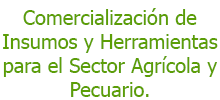
<style>
.page{position:relative;width:220px;height:100px;background:#ffffff}
.page>*{position:absolute;margin:0}
.t1{font:20px "Tahoma";color:#5c9e06}
.t2{font:1px "Tahoma";color:#0b740b}
</style>
<div class="page">
<p class="t1" style="left:3px;top:8px;width:215px;height:89px;text-align:center"><span class="t2"><br></span>Comercialización de Insumos y Herramientas para el Sector Agrícola y Pecuario.</p>
</div>
